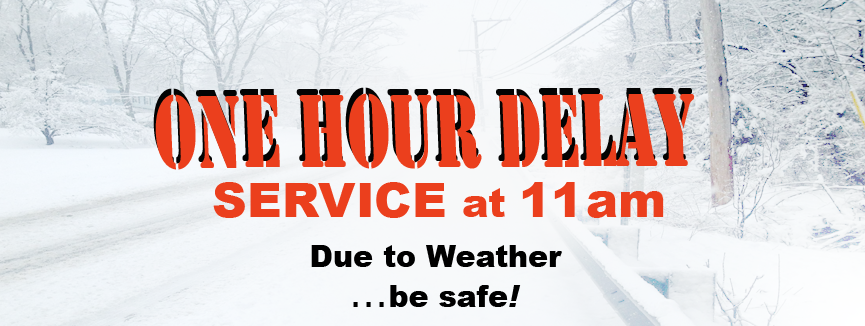
<style>
.page{position:relative;width:865px;height:326px}
.page>*{position:absolute;margin:0}
.t1{font:107.7px "Stencil";color:#eb3f1d;scale:0.62 1}
.t2{font:48px "Arial-Black";color:#eb3f1d}
.t3{font:40px "Arial-Black";color:#eb3f1d}
.t4{font:30px "Arial-Black";color:#000000}
.t5{font:36px "Verdana";color:#000000}
.t6{font:30px "Verdana-BoldItalic";color:#000000}
</style>
<div class="page">
<p class="t1" style="left:153px;top:87px;width:539px;height:77px">ONE HOUR DELAY</p>
<p class="t1" style="left:155px;top:93px;width:539px;height:77px">ONE HOUR DELAY</p>
<p class="t2" style="left:213px;top:182px;width:451px;height:36px">SERVICE <span class="t3">at </span>11 am</p>
<p class="t4" style="left:311px;top:245px;width:251px;height:22px">Due to Weather</p>
<p class="t4" style="left:353px;top:285px;width:168px;height:22px"><span class="t5">...</span>be safe<span class="t6">!</span></p>
</div>
